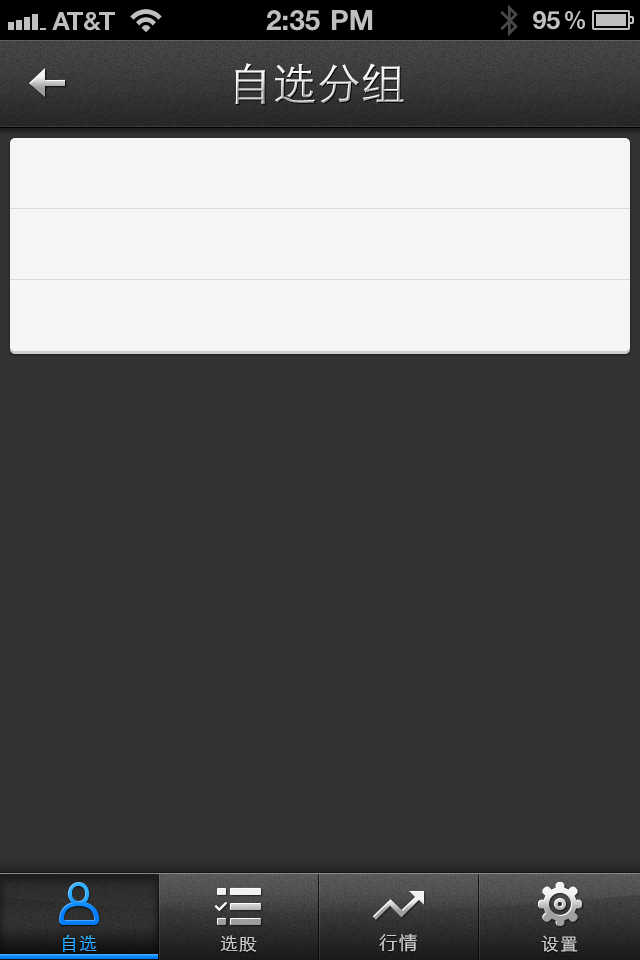
<style>
.page{position:relative;width:640px;height:960px;background:#333333}
.page>*{position:absolute;margin:0}
.t1{font:44px "STXihei";letter-spacing:0.005em}
.t2{font:18px "STXihei";letter-spacing:0.05em}
.t3{font:18px "STXihei";letter-spacing:0.05em;color:#cccccc}
.t4{font:18px "MicrosoftYaHei";letter-spacing:0.1em;color:#cccccc}
</style>
<div class="page">
<p class="t1" style="left:235px;top:63px;width:169px;height:41px">自选分组</p>
<p class="t2" style="left:62px;top:935px;width:35px;height:17px">自选</p>
<p class="t3" style="left:220px;top:935px;width:37px;height:17px">选股</p>
<p class="t4" style="left:379px;top:933px;width:38px;height:19px">行情</p>
<p class="t3" style="left:541px;top:935px;width:37px;height:17px">设置</p>
</div>
